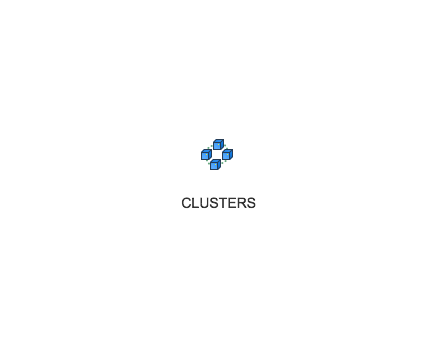
<style>
.page{position:relative;width:435px;height:346px;background:#ffffff}
.page>*{position:absolute;margin:0}
.t1{font:14px "ArialMT";color:#333333}
</style>
<div class="page">
<p class="t1" style="left:181px;top:197px;width:75px;height:12px">CLUSTERS</p>
</div>
